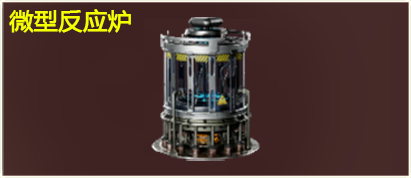
<style>
.page{position:relative;width:411px;height:178px}
.page>*{position:absolute;margin:0}
.t1{font:24px "MicrosoftYaHeiUI";color:#f4ff00;font-weight:bold}
</style>
<div class="page">
<p class="t1" style="left:9px;top:9px;width:122px;height:24px">微型反应炉</p>
</div>
